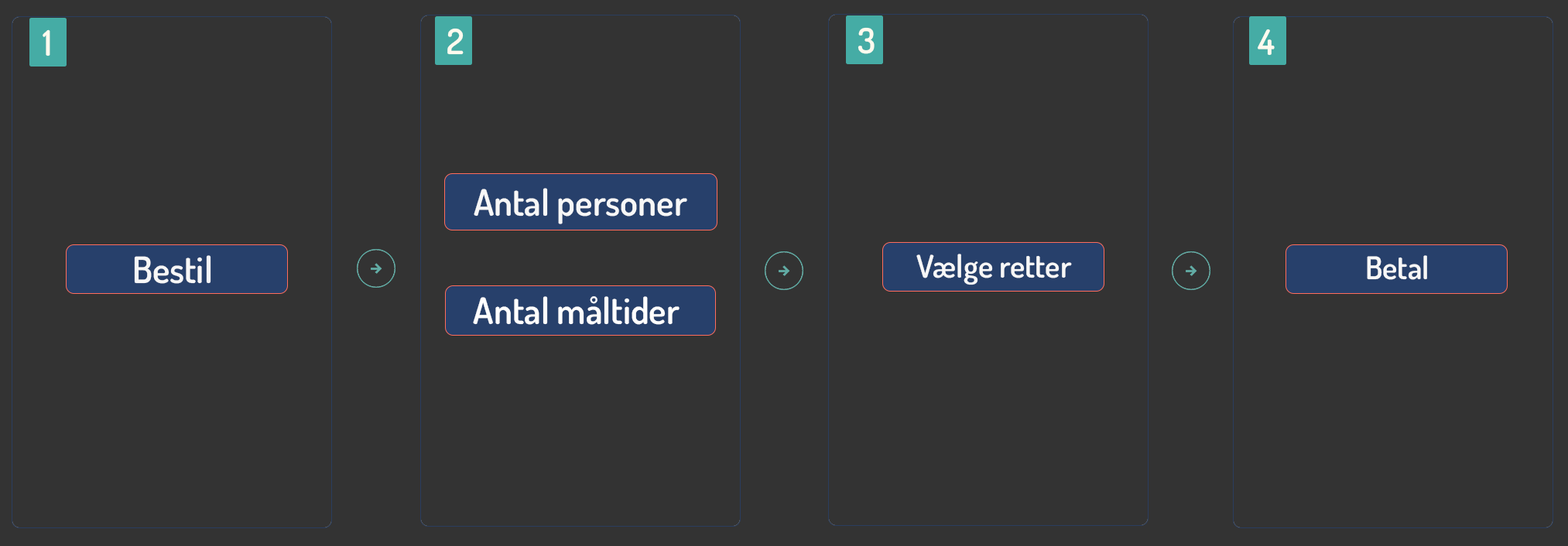
<style>
.page{position:relative;width:1568px;height:546px;background:#333333}
.page>*{position:absolute;margin:0}
.t1{font:35px "Dosis-SemiBold";color:#fefaee}
.t2{font:36.4px "Dosis-SemiBold";color:#f7f7f7}
.t3{font:31.3px "Dosis-SemiBold";color:#f7f7f7}
.t4{font:36.4px "Dosis-SemiBold";color:#ffffff}
</style>
<div class="page">
<p class="t1" style="left:43px;top:29px;width:7px;height:27px">1</p>
<p class="t1" style="left:447px;top:28px;width:17px;height:27px">2</p>
<p class="t1" style="left:858px;top:27px;width:17px;height:27px">3</p>
<p class="t1" style="left:1258px;top:29px;width:17px;height:27px">4</p>
<p class="t2" style="left:474px;top:188px;width:213px;height:36px">Antal personer</p>
<p class="t2" style="left:134px;top:255px;width:77px;height:29px">Bestil</p>
<p class="t3" style="left:916px;top:254px;width:156px;height:32px">Vælge retter</p>
<p class="t3" style="left:1367px;top:255px;width:60px;height:25px">Betal</p>
<p class="t4" style="left:473px;top:296px;width:207px;height:29px">Antal måltider</p>
</div>
